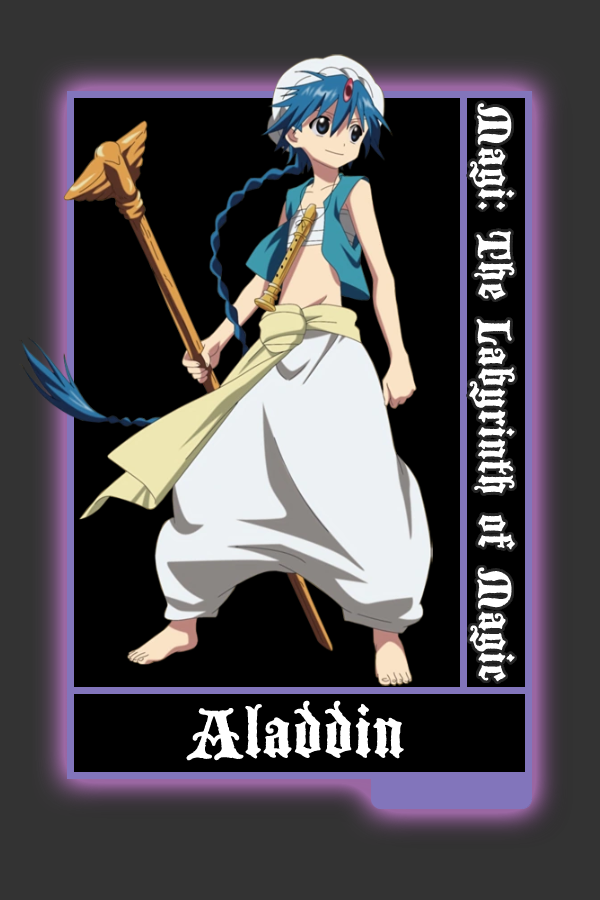
<style>
.page{position:relative;width:600px;height:900px;background:#000000}
.page>*{position:absolute;margin:0}
.t1{font:50px "BlackwoodCastle";color:#ffffff}
.t2{font:75px "BlackwoodCastle";color:#ffffff}
</style>
<div class="page">
<p class="t1" style="left:469px;top:103px;width:46px;height:579px;rotate:90deg">Magi: The Labyrinth of Magic</p>
<p class="t2" style="left:186px;top:700px;width:218px;height:61px">Aladdin</p>
</div>
